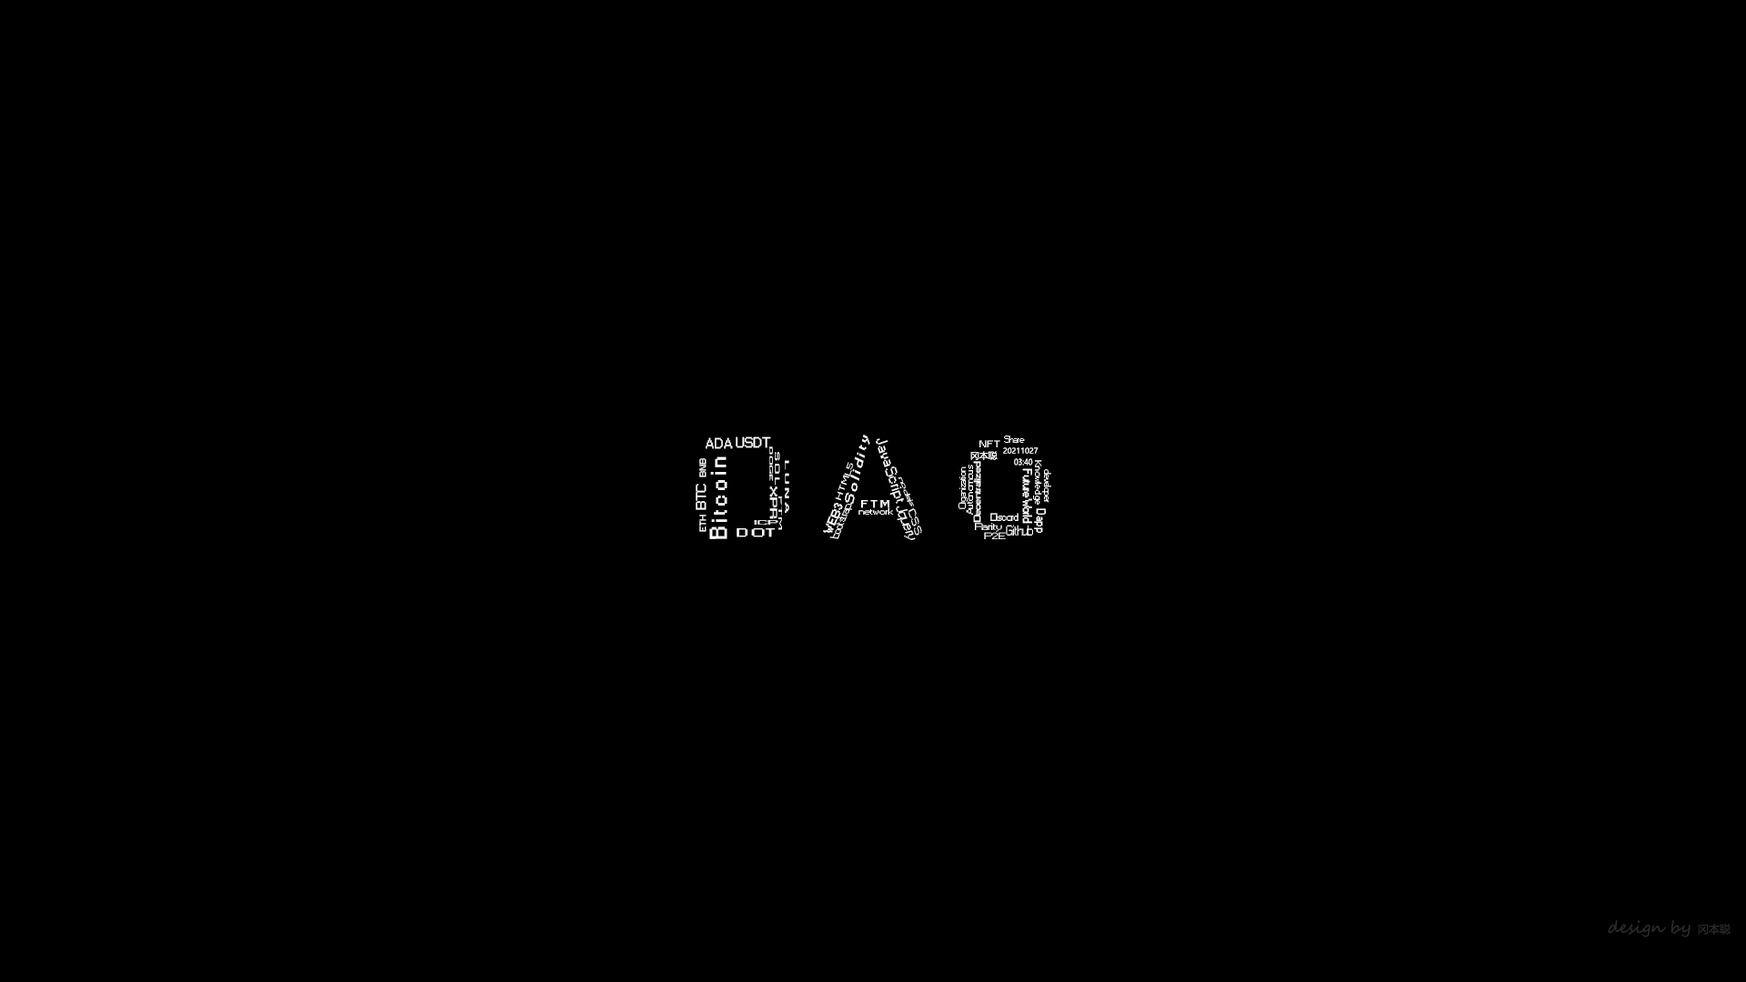
<style>
.page{position:relative;width:1746px;height:982px;background:#000000}
.page>*{position:absolute;margin:0}
.t1{font:13.5px "Small Fonts";color:#ffffff;font-weight:bold;scale:0.96 1}
.t2{font:12.8px "Small Fonts";color:#ffffff;font-weight:bold;scale:0.96 1}
.t3{font:12.2px "Small Fonts";color:#ffffff;font-weight:bold;scale:1.57 1}
.t4{font:9px "Small Fonts";color:#ffffff}
.t5{font:4.3px "Small Fonts";color:#ffffff;font-weight:bold;scale:2.77 1}
.t6{font:15.1px "Small Fonts";color:#ffffff;scale:1.18 1}
.t7{font:9px "Small Fonts";color:#ffffff;scale:1.62 1}
.t8{font:7.5px "MicrosoftYaHei";color:#ffffff}
.t9{font:8.4px "Small Fonts";color:#ffffff;font-weight:bold;scale:1.05 1}
.t10{font:22.4px "Small Fonts";color:#ffffff;font-weight:bold;scale:1.05 1}
.t11{font:6.2px "Small Fonts";color:#ffffff;font-weight:bold;scale:2.73 1}
.t12{font:5.5px "Small Fonts";color:#ffffff;font-weight:bold;scale:3.77 1}
.t13{font:7.4px "Small Fonts";color:#ffffff;scale:1.69 1}
.t14{font:9px "MicrosoftYaHei";color:#ffffff}
.t15{font:8.8px "Small Fonts";color:#ffffff;font-weight:bold;scale:1.36 1}
.t16{font:8.3px "MicrosoftYaHei";color:#ffffff;scale:0.86 1}
.t17{font:9px "Small Fonts";color:#ffffff;scale:1.23 1}
.t18{font:8.8px "Small Fonts";color:#ffffff;scale:1.22 1}
.t19{font:12.3px "Small Fonts";color:#ffffff;font-weight:bold;scale:0.96 1}
.t20{font:12.5px "Small Fonts";color:#ffffff;font-weight:bold;scale:1.05 1}
.t21{font:6.6px "Small Fonts";color:#ffffff;scale:1.98 1}
.t22{font:9.2px "Small Fonts";color:#ffffff;font-weight:bold;scale:2.13 1}
.t23{font:4.7px "Small Fonts";color:#ffffff;scale:4.77 1}
.t24{font:11.8px "Small Fonts";color:#ffffff;font-weight:bold}
.t25{font:10px "Small Fonts";color:#ffffff;scale:1.06 1}
.t26{font:9.3px "Small Fonts";color:#ffffff;scale:1.31 1}
.t27{font:9.6px "Small Fonts";color:#ffffff;font-weight:bold;scale:1.59 1}
.t28{font:14.7px "Small Fonts";color:#ffffff;scale:1.04 1}
.t29{font:9.8px "Small Fonts";color:#ffffff;scale:1.65 1}
.t30{font:12.3px "Small Fonts";color:#ffffff;font-weight:bold;scale:0.81 1}
.t31{font:6.1px "Small Fonts";color:#ffffff;font-weight:bold;scale:3.19 1}
.t32{font:10px "Small Fonts";color:#ffffff}
.t33{font:10.8px "Small Fonts";color:#ffffff;font-weight:bold;scale:1.99 1}
.t34{font:8.8px "Small Fonts";color:#ffffff;scale:1.46 1}
.t35{font:9px "Small Fonts";color:#ffffff;scale:1.56 1}
.t36{font:13.5px "Small Fonts";color:#ffffff;scale:0.81 1}
.t37{font:16.3px "SegoeScript";color:#2a2a2a}
.t38{font:10.9px "MicrosoftYaHei";color:#2a2a2a}
</style>
<div class="page">
<p class="t1" style="left:706px;top:437px;width:27px;height:12px">A D A</p>
<p class="t2" style="left:736px;top:436px;width:35px;height:12px">U S D T</p>
<p class="t3" style="left:845px;top:435px;width:25px;height:70px;rotate:-77deg">S o l i d i t y</p>
<p class="t4" style="left:1004px;top:436px;width:21px;height:7px">Share</p>
<p class="t5" style="left:769px;top:446px;width:4px;height:35px;rotate:90deg">D O G E</p>
<p class="t6" style="left:876px;top:438px;width:28px;height:66px;rotate:72deg">JavaScript</p>
<p class="t7" style="left:979px;top:440px;width:21px;height:7px">NFT</p>
<p class="t8" style="left:1003px;top:447px;width:35px;height:7px">20211027</p>
<p class="t9" style="left:699px;top:458px;width:7px;height:19px;rotate:-90deg">B N B</p>
<p class="t10" style="left:709px;top:456px;width:18px;height:83px;rotate:-90deg">B i t c o i n</p>
<p class="t11" style="left:775px;top:452px;width:5px;height:34px;rotate:90deg">S O L</p>
<p class="t12" style="left:785px;top:460px;width:4px;height:53px;rotate:90deg">L U N A</p>
<p class="t13" style="left:835px;top:462px;width:19px;height:39px;rotate:-71deg">H T M L5</p>
<p class="t14" style="left:970px;top:451px;width:27px;height:9px">冈本聪</p>
<p class="t15" style="left:973px;top:461px;width:8px;height:62px;rotate:-90deg">Decentralized</p>
<p class="t16" style="left:1014px;top:458px;width:19px;height:8px">03:40</p>
<p class="t17" style="left:1033px;top:460px;width:9px;height:45px;rotate:89deg">Knowledge</p>
<p class="t4" style="left:958px;top:466px;width:9px;height:43px;rotate:-90deg">Organization</p>
<p class="t18" style="left:966px;top:465px;width:7px;height:50px;rotate:-90deg">Autonomous</p>
<p class="t19" style="left:1022px;top:468px;width:10px;height:56px;rotate:90deg">Future World</p>
<p class="t4" style="left:1042px;top:469px;width:9px;height:34px;rotate:90deg">developer</p>
<p class="t20" style="left:696px;top:484px;width:10px;height:26px;rotate:-90deg">B T C</p>
<p class="t21" style="left:897px;top:476px;width:17px;height:30px;rotate:67deg">nodejs</p>
<p class="t22" style="left:769px;top:486px;width:8px;height:33px;rotate:90deg">XPR</p>
<p class="t23" style="left:778px;top:496px;width:4px;height:34px;rotate:90deg">FTM</p>
<p class="t24" style="left:823px;top:502px;width:20px;height:31px;rotate:-68deg">W E B 3</p>
<p class="t25" style="left:829px;top:504px;width:23px;height:35px;rotate:-68deg">bootstrap</p>
<p class="t26" style="left:858px;top:507px;width:35px;height:8px">network</p>
<p class="t27" style="left:861px;top:500px;width:28px;height:8px">F T M</p>
<p class="t28" style="left:896px;top:506px;width:20px;height:34px;rotate:70deg">Jquery</p>
<p class="t29" style="left:908px;top:508px;width:14px;height:28px;rotate:72deg">CSS</p>
<p class="t30" style="left:1034px;top:508px;width:12px;height:25px;rotate:90deg">D a p p</p>
<p class="t9" style="left:699px;top:515px;width:7px;height:17px;rotate:-90deg">E T H</p>
<p class="t31" style="left:754px;top:520px;width:24px;height:6px">ICP</p>
<p class="t32" style="left:990px;top:513px;width:28px;height:8px">Discord</p>
<p class="t33" style="left:736px;top:528px;width:39px;height:9px">D OT</p>
<p class="t34" style="left:975px;top:523px;width:27px;height:9px">Rarity</p>
<p class="t35" style="left:984px;top:532px;width:22px;height:7px">P2E</p>
<p class="t36" style="left:1006px;top:525px;width:27px;height:11px">Github</p>
<p class="t37" style="left:1608px;top:920px;width:122px;height:17px">design by <span class="t38">冈本聪</span></p>
</div>
